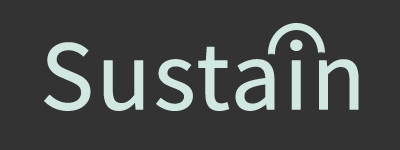
<style>
.page{position:relative;width:400px;height:150px;background:#333333}
.page>*{position:absolute;margin:0}
.t1{font:100px "SourceSansPro-Regular";color:#d1e8e2;font-weight:bold}
</style>
<div class="page">
<p class="t1" style="left:44px;top:39px;width:315px;height:72px">Sustain</p>
</div>
